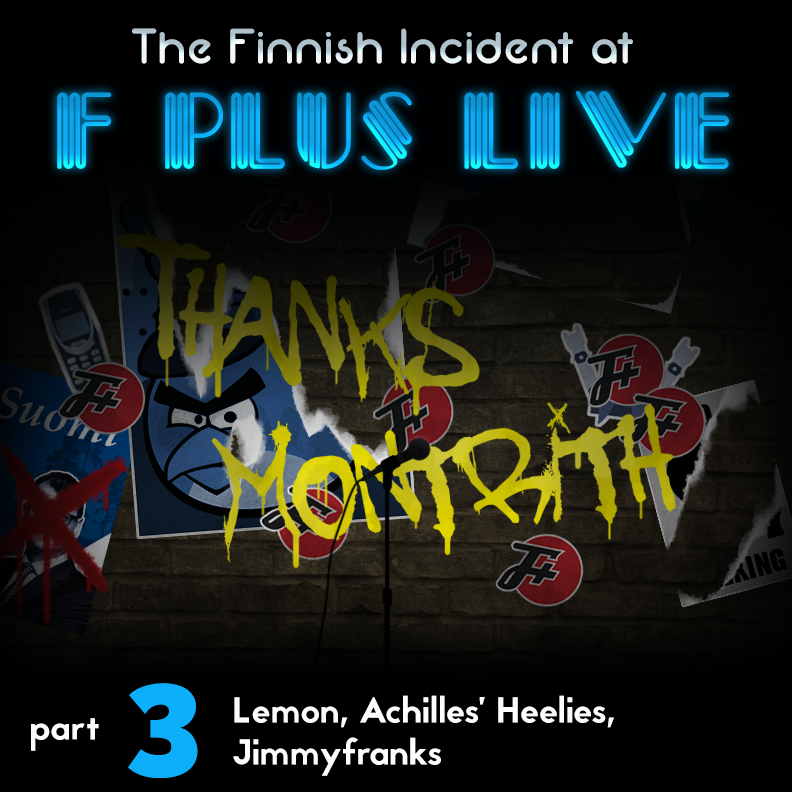
<style>
.page{position:relative;width:792px;height:792px}
.page>*{position:absolute;margin:0}
.t1{font:49.7px "Neon80s"}
.t2{font:102px "Picadilly"}
.t3{font:130.7px "Raleway-Heavy";color:#0daffa}
.t4{font:36px/42px "Jaapokki-Regular";color:#fdfdfd}
.t5{font:36px "Jaapokkienchance-Regular";color:#fdfdfd}
</style>
<div class="page">
<p class="t1" style="left:132px;top:28px;width:501px;height:36px">The Finnish Incident at</p>
<p class="t2" style="left:57px;top:91px;width:672px;height:79px">F PLUS LIVE</p>
<p class="t2" style="left:57px;top:91px;width:672px;height:79px">F PLUS LIVE</p>
<p class="t3" style="left:128px;top:683px;width:70px;height:95px">3</p>
<p class="t4" style="left:233px;top:695px;width:381px;height:81px">Lemon, Achilles’ Heelies,<br>Jimmyfranks</p>
<p class="t5" style="left:31px;top:718px;width:68px;height:33px">part</p>
</div>
